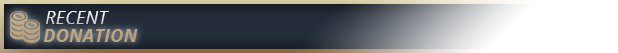
<style>
.page{position:relative;width:618px;height:53px}
.page>*{position:absolute;margin:0}
.t1{font:17.8px "OpenSans-Italic";letter-spacing:0.02em}
.t2{font:17.8px "OpenSans-BoldItalic";letter-spacing:0.02em;color:#bba684}
</style>
<div class="page">
<p class="t1" style="left:46px;top:11px;width:63px;height:13px">RECENT</p>
<p class="t2" style="left:43px;top:29px;width:95px;height:13px">DONATION</p>
</div>
